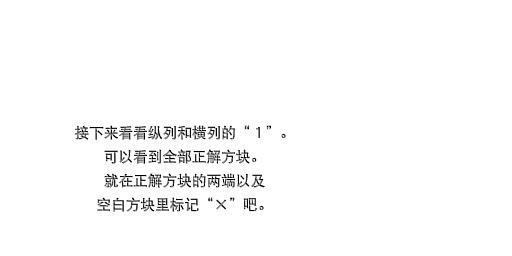
<style>
.page{position:relative;width:512px;height:256px;background:#ffffff}
.page>*{position:absolute;margin:0}
.t1{font:14.7px/24px "DFPHeiW5-GB"}
</style>
<div class="page">
<p class="t1" style="left:75px;top:125px;width:211px;height:87px;text-align:center">接下来看看纵列和横列的“１”。<br>可以看到全部正解方块。<br>就在正解方块的两端以及<br>空白方块里标记“×”吧。</p>
</div>
